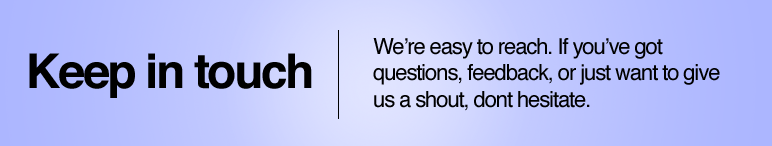
<style>
.page{position:relative;width:772px;height:146px}
.page>*{position:absolute;margin:0}
.t1{font:22px "Helvetica";letter-spacing:-0.05em;color:#000000}
.t2{font:48px "Helvetica-Bold";letter-spacing:-0.05em;color:#000000}
</style>
<div class="page">
<p class="t1" style="left:373px;top:38px;width:347px;height:73px">We’re easy to reach. If you’ve got <br>questions, feedback, or just want to give <br>us a shout, dont hesitate.</p>
<p class="t2" style="left:29px;top:53px;width:283px;height:45px">Keep in touch</p>
</div>
